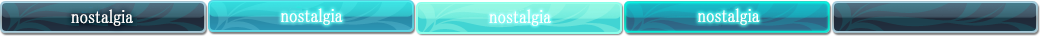
<style>
.page{position:relative;width:1040px;height:37px}
.page>*{position:absolute;margin:0}
.t1{font:19px "MS-PMincho";color:#ffffff;font-weight:bold;scale:0.84 1}
</style>
<div class="page">
<p class="t1" style="left:71px;top:9px;width:62px;height:17px">nostalgia</p>
<p class="t1" style="left:281px;top:8px;width:62px;height:17px">nostalgia</p>
<p class="t1" style="left:489px;top:9px;width:62px;height:17px">nostalgia</p>
<p class="t1" style="left:698px;top:8px;width:62px;height:17px">nostalgia</p>
</div>
